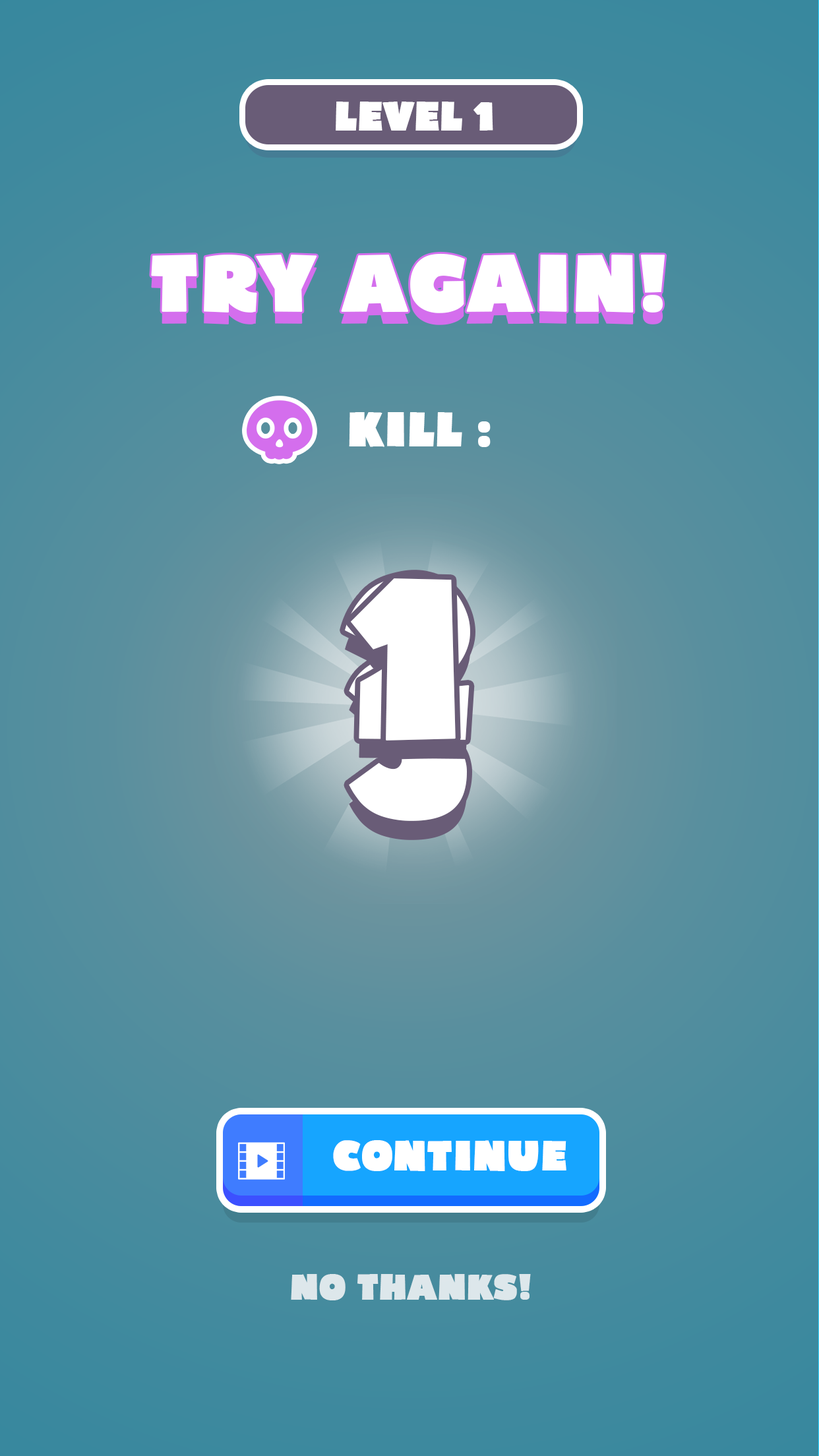
<style>
.page{position:relative;width:819px;height:1456px}
.page>*{position:absolute;margin:0}
.t1{font:38px "Bumpo";color:#ffffff;font-weight:bold}
.t2{font:76.1px "Bumpo";color:#ffffff;font-weight:bold}
.t3{font:45.3px "Bumpo";color:#ffffff;font-weight:bold}
.t4{font:219.8px "Bumpo";color:#ffffff;font-weight:bold}
.t5{font:39.6px "Bumpo";color:#ffffff;font-weight:bold}
.t6{font:33.3px "Bumpo";color:#dde7eb;font-weight:bold}
</style>
<div class="page">
<p class="t1" style="left:336px;top:102px;width:157px;height:29px">LEVEL 1</p>
<p class="t2" style="left:151px;top:253px;width:514px;height:60px">TRY AGAIN!</p>
<p class="t3" style="left:349px;top:412px;width:142px;height:35px">KILL :</p>
<p class="t4" style="left:345px;top:575px;width:125px;height:165px">2</p>
<p class="t4" style="left:350px;top:578px;width:106px;height:163px">1</p>
<p class="t4" style="left:349px;top:656px;width:118px;height:165px">3</p>
<p class="t5" style="left:333px;top:1140px;width:233px;height:31px">CONTINUE</p>
<p class="t6" style="left:291px;top:1274px;width:240px;height:26px">NO THANKS!</p>
</div>
